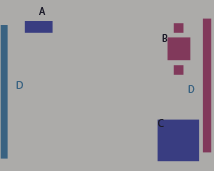
<style>
.page{position:relative;width:214px;height:171px;background:#acaba9}
.page>*{position:absolute;margin:0}
.t1{font:10.7px "MyriadPro-Regular";color:#1d1c2a}
.t2{font:10.7px "MyriadPro-Regular";color:#396281}
</style>
<div class="page">
<p class="t1" style="left:39px;top:7px;width:7px;height:8px">A</p>
<p class="t1" style="left:162px;top:34px;width:6px;height:8px">B</p>
<p class="t2" style="left:16px;top:81px;width:7px;height:8px">D</p>
<p class="t2" style="left:188px;top:85px;width:7px;height:8px">D</p>
<p class="t1" style="left:158px;top:119px;width:6px;height:8px">C</p>
</div>
